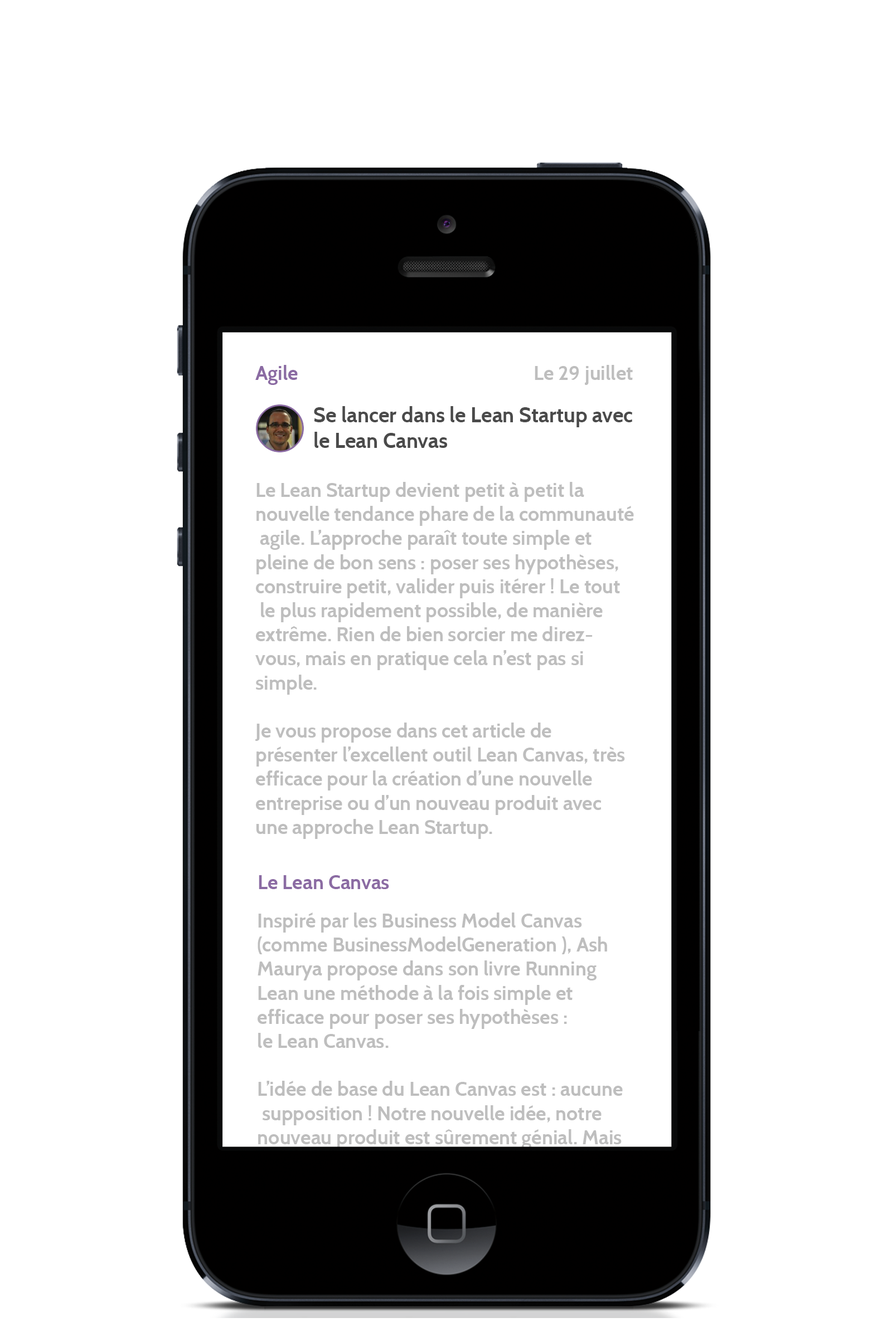
<style>
.page{position:relative;width:892px;height:1337px;background:#ffffff}
.page>*{position:absolute;margin:0}
.t1{font:20.1px "Cabin-Bold";color:#8b6ba3}
.t2{font:20.1px "Cabin-Bold";color:#bebebe}
.t3{font:21.2px "Cabin-Bold";color:#4a4a4a}
</style>
<div class="page">
<p class="t1" style="left:255px;top:365px;width:43px;height:20px">Agile</p>
<p class="t2" style="left:534px;top:365px;width:98px;height:20px">Le 29 juillet</p>
<p class="t3" style="left:314px;top:406px;width:318px;height:42px">Se lancer dans le Lean Startup avec<br>le Lean Canvas</p>
<p class="t2" style="left:255px;top:482px;width:379px;height:357px">Le Lean Startup devient petit à petit la <br>nouvelle tendance phare de la communauté<br> agile. L’approche paraît toute simple et <br>pleine de bon sens : poser ses hypothèses, <br>construire petit, valider puis itérer ! Le tout<br> le plus rapidement possible, de manière <br>extrême. Rien de bien sorcier me direz-<br>vous, mais en pratique cela n’est pas si <br>simple.<br><br>Je vous propose dans cet article de <br>présenter l’excellent outil Lean Canvas, très <br>efficace pour la création d’une nouvelle <br>entreprise ou d’un nouveau produit avec <br>une approche Lean Startup.</p>
<p class="t1" style="left:259px;top:875px;width:130px;height:14px">Le Lean Canvas</p>
</div>
